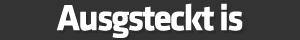
<style>
.page{position:relative;width:300px;height:40px;background:#333333}
.page>*{position:absolute;margin:0}
.t1{font:37.5px "KlavikaBold-Bold";letter-spacing:-0.05em;color:#ffffff}
</style>
<div class="page">
<p class="t1" style="left:56px;top:3px;width:187px;height:35px">Ausgsteckt is</p>
</div>
